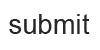
<style>
.page{position:relative;width:100px;height:50px;background:#ffffff}
.page>*{position:absolute;margin:0}
.t1{font:27.4px "ArialMT";color:#272727}
</style>
<div class="page">
<p class="t1" style="left:9px;top:14px;width:81px;height:20px">submit</p>
</div>
